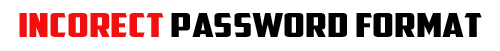
<style>
.page{position:relative;width:500px;height:51px;background:#ffffff}
.page>*{position:absolute;margin:0}
.t1{font:32.6px "AmericanCaptain";color:#000000;scale:1.53 1}
.t2{font:32.6px "AmericanCaptain";color:#f40f0f;scale:1.53 1}
</style>
<div class="page">
<p class="t1" style="left:19px;top:13px;width:463px;height:24px"><span class="t2">incorect</span> password format</p>
</div>
